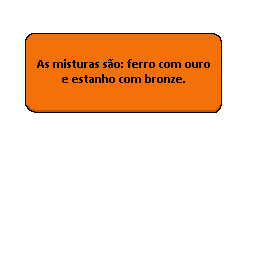
<style>
.page{position:relative;width:256px;height:256px;background:#ffffff}
.page>*{position:absolute;margin:0}
.t1{font:12.5px "Calibri-Bold";color:#000000}
</style>
<div class="page">
<p class="t1" style="left:37px;top:59px;width:173px;height:24px;text-align:center">As misturas são: ferro com ouro e estanho com bronze.</p>
</div>
